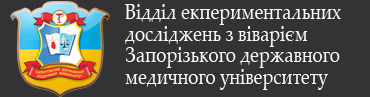
<style>
.page{position:relative;width:370px;height:97px;background:#333333}
.page>*{position:absolute;margin:0}
.t1{font:21.6px "PalatinoLinotype-Roman";color:#fbfbfd;scale:0.83 1}
</style>
<div class="page">
<p class="t1" style="left:125px;top:4px;width:216px;height:86px">Відділ екпериментальних<br>досліджень з віварієм<br>Запорізького державного<br>медичного університету</p>
</div>
